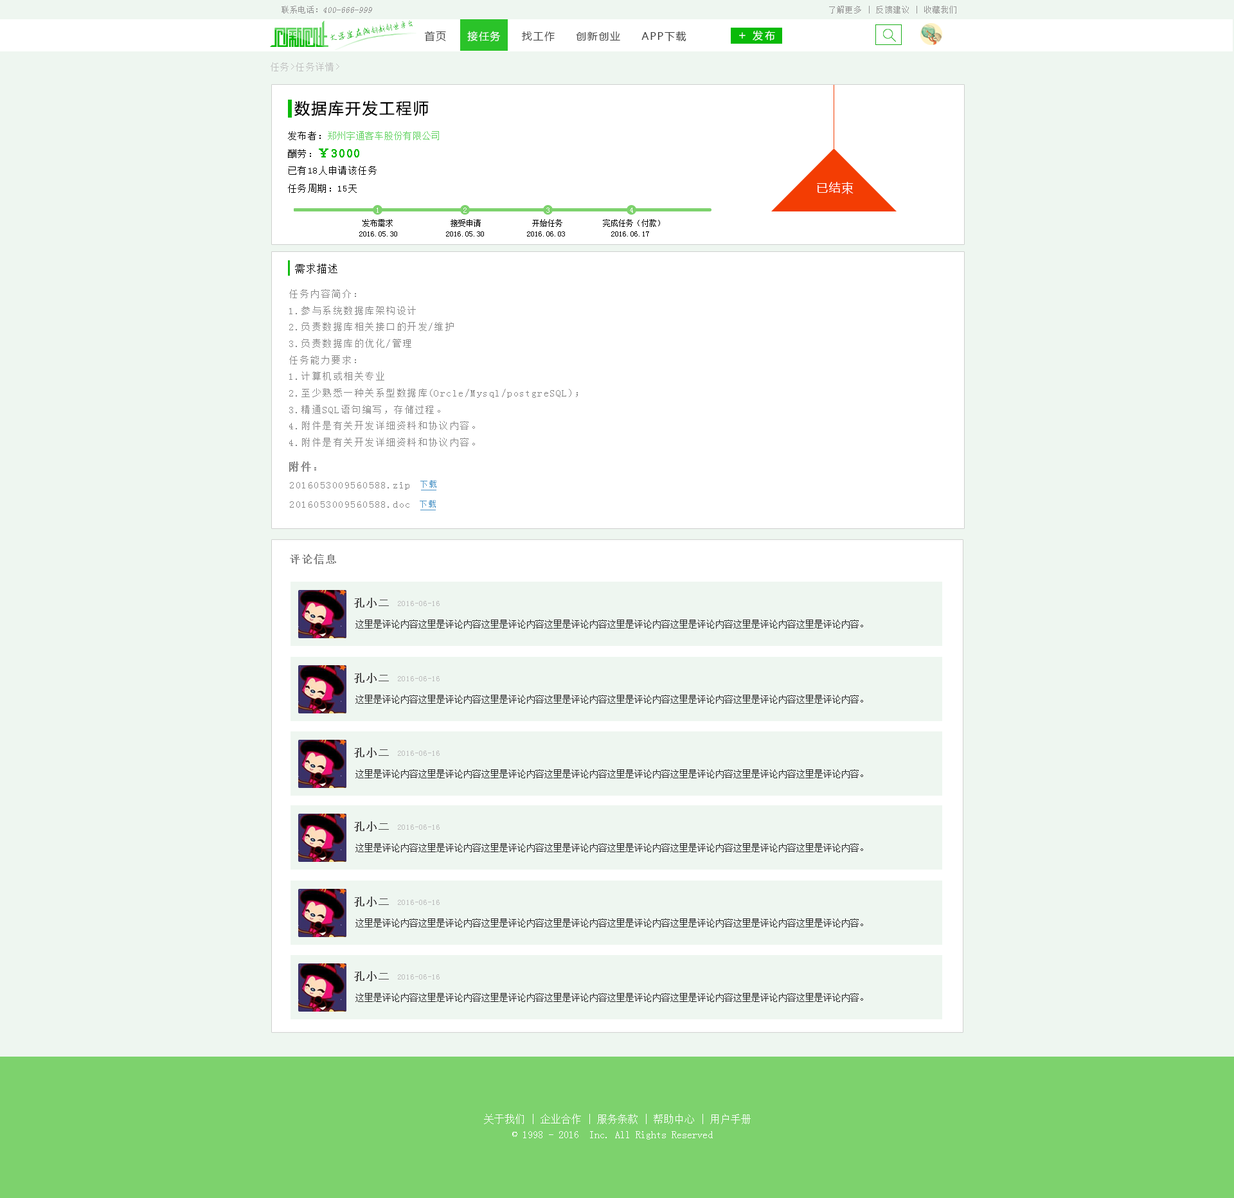
<style>
.page{position:relative;width:1234px;height:1198px;background:#eef6f0}
.page>*{position:absolute;margin:0}
.t1{font:8.6px "SimSun";color:#959595;font-style:italic}
.t2{font:8.6px "SimSun";color:#959595}
.t3{font:7.7px "SimSun";letter-spacing:0.1em;color:#959494}
.t4{font:8px "AnJingCheng-Xing-2.0";letter-spacing:-0.01em;color:#09ba08}
.t5{font:9px "AnJingCheng-Xing-2.0";letter-spacing:-0.01em;color:#09ba08}
.t6{font:10.3px "MicrosoftYaHei";letter-spacing:0.1em;color:#3e3e3e}
.t7{font:10.3px "MicrosoftYaHei";letter-spacing:0.1em;color:#ffffff}
.t8{font:12px "MicrosoftYaHei";letter-spacing:0.2em;color:#ffffff}
.t9{font:10.3px "MicrosoftYaHei";letter-spacing:0.2em;color:#ffffff}
.t10{font:9px "SimSun";letter-spacing:0.1em;color:#bebebe}
.t11{font:15.4px "MicrosoftYaHei";letter-spacing:0.1em;color:#000000}
.t12{font:9px "SimSun";letter-spacing:0.05em;color:#62d361}
.t13{font:9px "SimSun";letter-spacing:0.1em;color:#000000}
.t14{font:11.6px "SimSun";letter-spacing:0.1em;color:#09ba08;font-weight:bold}
.t15{font:11.6px "MicrosoftYaHei";letter-spacing:0.1em;color:#ffffff}
.t16{font:7.7px "SimSun";letter-spacing:0.1em;color:#ffffff}
.t17{font:7.7px "SimSun";color:#000000}
.t18{font:11.1px "SimSun";color:#000000}
.t19{font:9.4px "SimSun";letter-spacing:0.1em;color:#868686}
.t20{font:10.3px "SimSun";letter-spacing:0.1em;color:#868686;font-weight:bold}
.t21{font:8.6px "SimSun";letter-spacing:0.1em;color:#4a93c6}
.t22{font:10.3px "SimSun";letter-spacing:0.1em;color:#4d4c4c;font-weight:bold}
.t23{font:7.7px "SimSun";color:#bbbbbb}
.t24{font:9px "SimSun";color:#242424}
.t25{font:10.3px/15.4px "SimSun";color:#ffffff}
</style>
<div class="page">
<p class="t1" style="left:282px;top:6px;width:90px;height:8px"><span class="t2">联系电话：</span>400-666-999</p>
<p class="t3" style="left:829px;top:6px;width:128px;height:8px">了解更多 | 反馈建议 | 收藏我们</p>
<p class="t4" style="left:330px;top:20px;width:83px;height:20px;rotate:-10deg"><span class="t5">大学生在线</span>创新创业平台</p>
<p class="t6" style="left:424px;top:31px;width:263px;height:11px">首页     <span class="t7">接任务</span>     找工作     创新创业     APP下载</p>
<p class="t8" style="left:739px;top:32px;width:7px;height:7px">+</p>
<p class="t9" style="left:753px;top:30px;width:22px;height:10px">发布</p>
<p class="t10" style="left:271px;top:62px;width:68px;height:9px">任务&gt;任务详情&gt;</p>
<p class="t11" style="left:294px;top:100px;width:135px;height:16px">数据库开发工程师</p>
<p class="t12" style="left:288px;top:131px;width:151px;height:9px"><span class="t13">发布者：</span>郑州宇通客车股份有限公司</p>
<p class="t14" style="left:288px;top:148px;width:71px;height:10px"><span class="t13">酬劳：</span>￥3000</p>
<p class="t13" style="left:289px;top:166px;width:88px;height:9px">已有18人申请该任务</p>
<p class="t13" style="left:288px;top:184px;width:69px;height:9px">任务周期：15天</p>
<p class="t15" style="left:817px;top:182px;width:37px;height:12px">已结束</p>
<p class="t16" style="left:377px;top:208px;width:2px;height:5px">1</p>
<p class="t16" style="left:464px;top:208px;width:3px;height:5px">2</p>
<p class="t16" style="left:546px;top:208px;width:4px;height:5px">3</p>
<p class="t16" style="left:630px;top:208px;width:3px;height:5px">4</p>
<p class="t17" style="left:363px;top:219px;width:30px;height:8px">发布需求</p>
<p class="t17" style="left:451px;top:219px;width:30px;height:8px">接受申请</p>
<p class="t17" style="left:532px;top:219px;width:30px;height:8px">开始任务</p>
<p class="t17" style="left:603px;top:219px;width:57px;height:8px">完成任务（付款）</p>
<p class="t17" style="left:359px;top:231px;width:38px;height:6px">2016.05.30</p>
<p class="t17" style="left:446px;top:231px;width:38px;height:6px">2016.05.30</p>
<p class="t17" style="left:527px;top:231px;width:38px;height:6px">2016.06.03</p>
<p class="t17" style="left:611px;top:231px;width:38px;height:6px">2016.06.17</p>
<p class="t18" style="left:295px;top:264px;width:43px;height:10px">需求描述</p>
<p class="t19" style="left:289px;top:289px;width:289px;height:158px">任务内容简介：<br>1.参与系统数据库架构设计<br>2.负责数据库相关接口的开发/维护<br>3.负责数据库的优化/管理<br>任务能力要求：<br>1.计算机或相关专业<br>2.至少熟悉一种关系型数据库(Orcle/Mysql/postgreSQL)；<br>3.精通SQL语句编写，存储过程。<br>4.附件是有关开发详细资料和协议内容。<br>4.附件是有关开发详细资料和协议内容。<br>4.附件是有关开发详细资料和协议内容。</p>
<p class="t20" style="left:289px;top:462px;width:27px;height:10px">附件：</p>
<p class="t19" style="left:290px;top:482px;width:120px;height:8px">2016053009560588.zip</p>
<p class="t21" style="left:420px;top:480px;width:17px;height:8px">下载</p>
<p class="t19" style="left:290px;top:501px;width:120px;height:7px">2016053009560588.doc</p>
<p class="t21" style="left:420px;top:500px;width:16px;height:8px">下载</p>
<p class="t20" style="left:290px;top:554px;width:46px;height:10px">评论信息</p>
<p class="t22" style="left:354px;top:598px;width:35px;height:10px">孔小二</p>
<p class="t23" style="left:398px;top:601px;width:42px;height:5px">2016-06-16</p>
<p class="t24" style="left:356px;top:620px;width:507px;height:9px">这里是评论内容这里是评论内容这里是评论内容这里是评论内容这里是评论内容这里是评论内容这里是评论内容这里是评论内容。</p>
<p class="t22" style="left:354px;top:673px;width:35px;height:10px">孔小二</p>
<p class="t23" style="left:398px;top:676px;width:42px;height:5px">2016-06-16</p>
<p class="t24" style="left:356px;top:695px;width:507px;height:9px">这里是评论内容这里是评论内容这里是评论内容这里是评论内容这里是评论内容这里是评论内容这里是评论内容这里是评论内容。</p>
<p class="t22" style="left:354px;top:748px;width:35px;height:10px">孔小二</p>
<p class="t23" style="left:398px;top:751px;width:42px;height:5px">2016-06-16</p>
<p class="t24" style="left:356px;top:770px;width:507px;height:9px">这里是评论内容这里是评论内容这里是评论内容这里是评论内容这里是评论内容这里是评论内容这里是评论内容这里是评论内容。</p>
<p class="t22" style="left:354px;top:822px;width:35px;height:10px">孔小二</p>
<p class="t23" style="left:398px;top:825px;width:42px;height:5px">2016-06-16</p>
<p class="t24" style="left:356px;top:843px;width:507px;height:9px">这里是评论内容这里是评论内容这里是评论内容这里是评论内容这里是评论内容这里是评论内容这里是评论内容这里是评论内容。</p>
<p class="t22" style="left:354px;top:897px;width:35px;height:10px">孔小二</p>
<p class="t23" style="left:398px;top:900px;width:42px;height:5px">2016-06-16</p>
<p class="t24" style="left:356px;top:919px;width:507px;height:9px">这里是评论内容这里是评论内容这里是评论内容这里是评论内容这里是评论内容这里是评论内容这里是评论内容这里是评论内容。</p>
<p class="t22" style="left:354px;top:971px;width:35px;height:11px">孔小二</p>
<p class="t23" style="left:398px;top:975px;width:42px;height:5px">2016-06-16</p>
<p class="t24" style="left:356px;top:993px;width:507px;height:9px">这里是评论内容这里是评论内容这里是评论内容这里是评论内容这里是评论内容这里是评论内容这里是评论内容这里是评论内容。</p>
<p class="t25" style="left:484px;top:1114px;width:267px;height:26px;text-align:center">关于我们 | 企业合作 | 服务条款 | 帮助中心 | 用户手册<br>© 1998 - 2016  Inc. All Rights Reserved</p>
</div>
